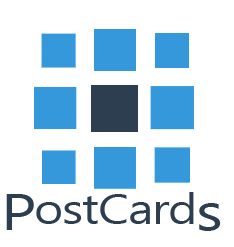
<style>
.page{position:relative;width:234px;height:247px;background:#ffffff}
.page>*{position:absolute;margin:0}
.t1{font:71.3px "Gadugi";letter-spacing:-0.025em;color:#2c3e50;scale:1.21 1}
.t2{font:89.1px "Gadugi";letter-spacing:-0.025em;color:#2c3e50;scale:1.21 1}
</style>
<div class="page">
<p class="t1" style="left:6px;top:192px;width:215px;height:39px"><span class="t2"> P</span>ostCard<span class="t2">s</span></p>
</div>
